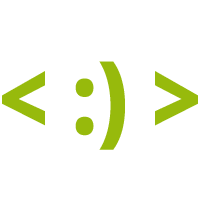
<style>
.page{position:relative;width:200px;height:200px;background:#ffffff}
.page>*{position:absolute;margin:0}
.t1{font:99px "OpenSans-Extrabold";letter-spacing:0.005em;color:#97ba0c;scale:0.88 1}
</style>
<div class="page">
<p class="t1" style="left:2px;top:61px;width:196px;height:89px">&lt; :) &gt;</p>
</div>
